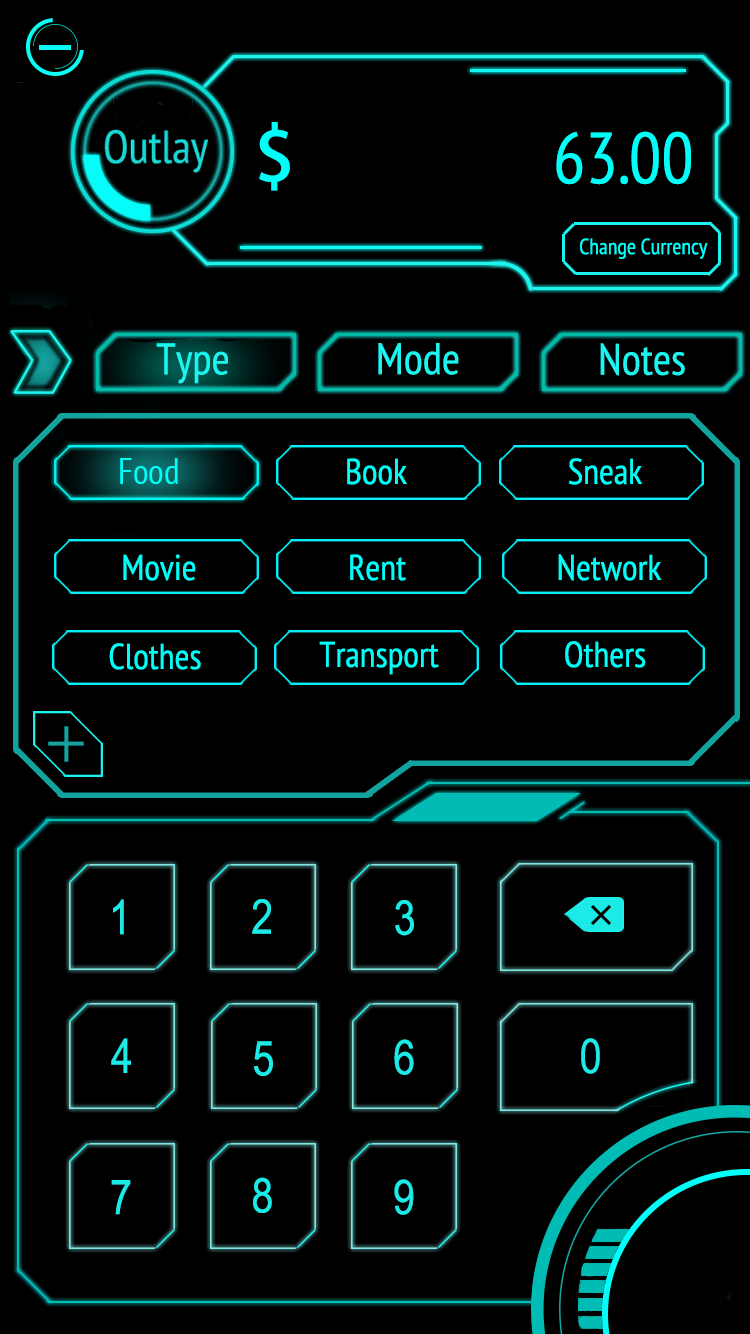
<style>
.page{position:relative;width:750px;height:1334px;background:#000000}
.page>*{position:absolute;margin:0}
.t1{font:72px "PTSans-Narrow";color:#00fff8}
.t2{font:72px "AdobeHeitiStd-Regular";color:#00fff8}
.t3{font:22px "PTSans-Narrow";color:#00fff8}
.t4{font:44px "PTSans-Narrow";color:#1cf4ef}
.t5{font:36px "PTSans-Narrow";color:#00fff8}
.t6{font:48px "ArialNarrow";color:#1beae6}
</style>
<div class="page">
<p class="t1" style="left:259px;top:122px;width:432px;height:69px"><span class="t2">$                </span>63.00</p>
<p class="t3" style="left:580px;top:238px;width:128px;height:21px">Change Currency</p>
<p class="t4" style="left:156px;top:343px;width:72px;height:41px">Type</p>
<p class="t4" style="left:378px;top:343px;width:81px;height:32px">Mode</p>
<p class="t4" style="left:600px;top:343px;width:85px;height:33px">Notes</p>
<p class="t5" style="left:120px;top:458px;width:58px;height:26px">Food</p>
<p class="t5" style="left:347px;top:458px;width:60px;height:27px">Book</p>
<p class="t5" style="left:568px;top:458px;width:74px;height:27px">Sneak</p>
<p class="t5" style="left:123px;top:554px;width:73px;height:27px">Movie</p>
<p class="t5" style="left:350px;top:554px;width:56px;height:27px">Rent</p>
<p class="t5" style="left:558px;top:554px;width:104px;height:27px">Network</p>
<p class="t5" style="left:319px;top:641px;width:120px;height:34px">Transport</p>
<p class="t5" style="left:565px;top:641px;width:81px;height:27px">Others</p>
<p class="t5" style="left:109px;top:643px;width:92px;height:27px">Clothes</p>
<p class="t6" style="left:113px;top:899px;width:11px;height:36px">1</p>
<p class="t6" style="left:252px;top:899px;width:19px;height:35px">2</p>
<p class="t6" style="left:395px;top:900px;width:19px;height:36px">3</p>
<p class="t6" style="left:111px;top:1038px;width:20px;height:35px">4</p>
<p class="t6" style="left:581px;top:1038px;width:19px;height:36px">0</p>
<p class="t6" style="left:254px;top:1041px;width:19px;height:35px">5</p>
<p class="t6" style="left:394px;top:1039px;width:20px;height:36px">6</p>
<p class="t6" style="left:111px;top:1180px;width:20px;height:35px">7</p>
<p class="t6" style="left:253px;top:1177px;width:19px;height:36px">8</p>
<p class="t6" style="left:394px;top:1179px;width:20px;height:36px">9</p>
</div>
